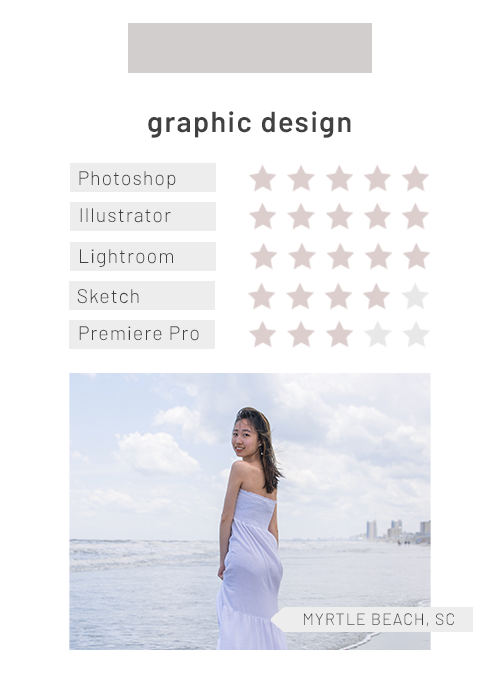
<style>
.page{position:relative;width:500px;height:685px;background:#ffffff}
.page>*{position:absolute;margin:0}
.t1{font:28.8px "Barlow-SemiBold";letter-spacing:0.05em;color:#414141}
.t2{font:19.7px "Barlow-Light";letter-spacing:0.05em;color:#414141}
.t3{font:16.4px "Barlow-Light";letter-spacing:0.05em;color:#414141}
</style>
<div class="page">
<p class="t1" style="left:148px;top:111px;width:203px;height:27px">graphic design</p>
<p class="t2" style="left:79px;top:171px;width:97px;height:18px">Photoshop</p>
<p class="t2" style="left:80px;top:208px;width:91px;height:15px">Illustrator</p>
<p class="t2" style="left:80px;top:249px;width:93px;height:18px">Lightroom</p>
<p class="t2" style="left:77px;top:289px;width:62px;height:15px">Sketch</p>
<p class="t2" style="left:79px;top:326px;width:120px;height:15px">Premiere Pro</p>
<p class="t3" style="left:304px;top:613px;width:150px;height:14px">MYRTLE BEACH, SC</p>
</div>
